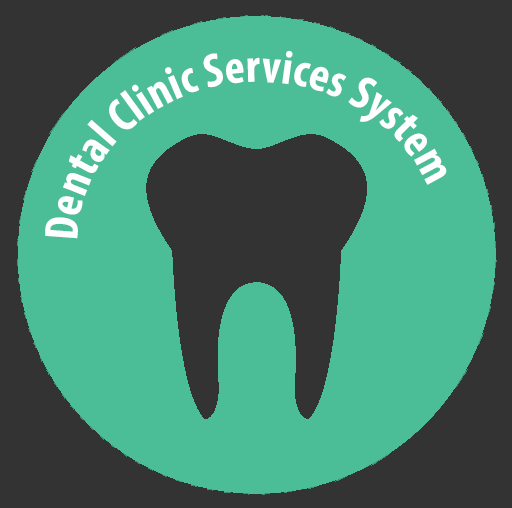
<style>
.page{position:relative;width:512px;height:508px;background:#4bbd97}
.page>*{position:absolute;margin:0}
.t1{font:48px "MyriadPro-BoldCond";color:#ffffff}
</style>
<div class="page">
<p class="t1" style="left:45px;top:50px;width:402px;height:189px;text-align:center">Dental Clinic Services System</p>
</div>
